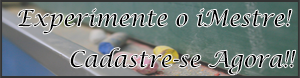
<style>
.page{position:relative;width:300px;height:78px}
.page>*{position:absolute;margin:0}
.t1{font:22px "LucidaCalligraphy-Italic";color:#000000}
</style>
<div class="page">
<p class="t1" style="left:18px;top:8px;width:274px;height:26px">Experimente o iMestre!</p>
<p class="t1" style="left:70px;top:48px;width:226px;height:27px">Cadastre-se Agora!!</p>
</div>
